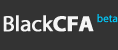
<style>
.page{position:relative;width:118px;height:50px;background:#333333}
.page>*{position:absolute;margin:0}
.t1{font:22px "MyriadWebPro";letter-spacing:-0.02em;color:#ffffff;font-weight:bold}
.t2{font:22px "MyriadWebPro-Bold";letter-spacing:-0.02em;color:#ffffff;font-weight:bold}
.t3{font:11px "MyriadPro-Regular";letter-spacing:-0.02em;color:#03c5f5;font-weight:bold}
</style>
<div class="page">
<p class="t1" style="left:3px;top:15px;width:91px;height:17px;opacity:0.95">Black<span class="t2">CFA</span></p>
<p class="t3" style="left:97px;top:14px;width:21px;height:9px">beta</p>
</div>
